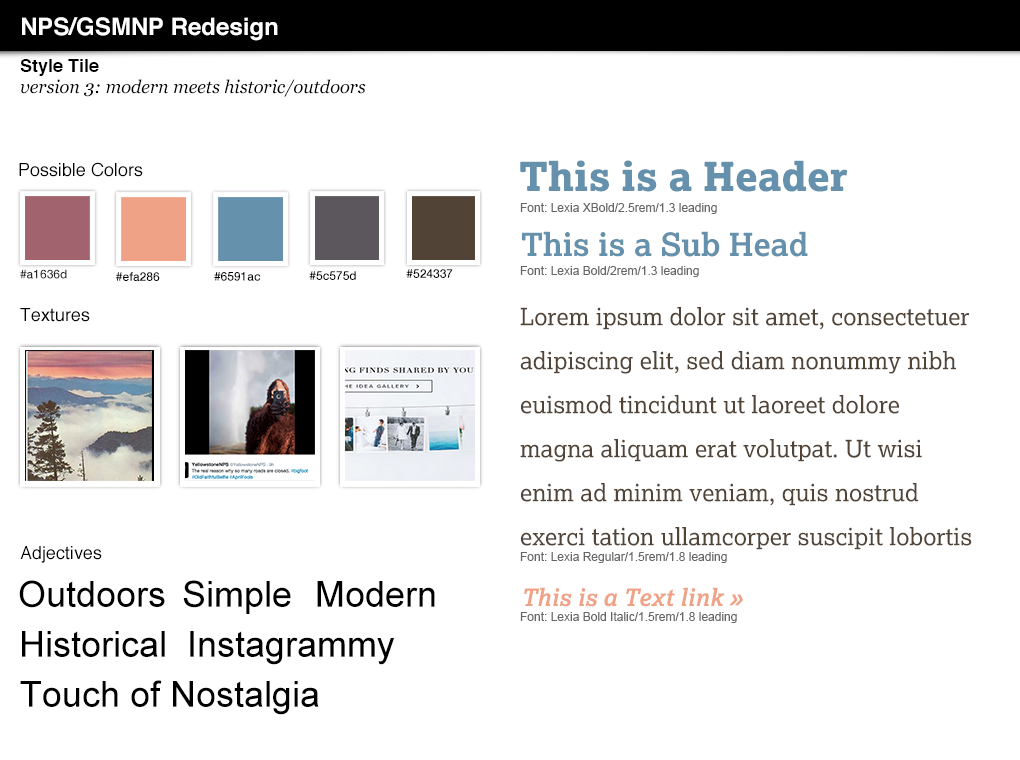
<style>
.page{position:relative;width:1020px;height:760px;background:#ffffff}
.page>*{position:absolute;margin:0}
.t1{font:24px "Helvetica-Bold";color:#ffffff}
.t2{font:18px "Helvetica-Bold";color:#000000}
.t3{font:18px "Georgia-Italic";color:#000000}
.t4{font:40px "Lexia-XBold";color:#6591ac}
.t5{font:18px "Helvetica";color:#000000}
.t6{font:12px "ArialMT";color:#666666}
.t7{font:32px "Lexia-Bold";color:#6591ac}
.t8{font:12px "HelveticaNeue-Medium";color:#282828}
.t9{font:12px "HelveticaNeue-Medium";color:#000000}
.t10{font:24px/44px "Lexia-Regular";color:#524337}
.t11{font:36px "ArialMT";color:#000000}
.t12{font:24px "Lexia-BoldItalic";color:#efa286}
</style>
<div class="page">
<p class="t1" style="left:22px;top:17px;width:256px;height:24px">NPS/GSMNP Redesign</p>
<p class="t2" style="left:20px;top:59px;width:79px;height:17px">Style Tile</p>
<p class="t3" style="left:20px;top:79px;width:346px;height:18px">version 3: modern meets historic/outdoors</p>
<p class="t4" style="left:520px;top:160px;width:328px;height:32px">This is a Header</p>
<p class="t5" style="left:19px;top:162px;width:124px;height:15px">Possible Colors</p>
<p class="t6" style="left:520px;top:203px;width:197px;height:11px">Font: Lexia XBold/2.5rem/1.3 leading</p>
<p class="t7" style="left:522px;top:231px;width:286px;height:26px">This is a Sub Head</p>
<p class="t8" style="left:20px;top:269px;width:47px;height:10px">#a1636d</p>
<p class="t9" style="left:406px;top:269px;width:47px;height:9px">#524337</p>
<p class="t6" style="left:520px;top:266px;width:179px;height:11px">Font: Lexia Bold/2rem/1.3 leading</p>
<p class="t9" style="left:116px;top:272px;width:44px;height:9px">#efa286</p>
<p class="t9" style="left:214px;top:272px;width:47px;height:9px">#6591ac</p>
<p class="t9" style="left:309px;top:271px;width:47px;height:9px">#5c575d</p>
<p class="t5" style="left:20px;top:308px;width:70px;height:14px">Textures</p>
<p class="t10" style="left:520px;top:307px;width:452px;height:243px">Lorem ipsum dolor sit amet, consectetuer adipiscing elit, sed diam nonummy nibh euismod tincidunt ut laoreet dolore magna aliquam erat volutpat. Ut wisi enim ad minim veniam, quis nostrud exerci tation ullamcorper suscipit lobortis nisl ut aliquip ex ea commodo consequat. Duis autem vel feugait.</p>
<p class="t5" style="left:20px;top:546px;width:82px;height:17px">Adjectives</p>
<p class="t6" style="left:520px;top:552px;width:207px;height:11px">Font: Lexia Regular/1.5rem/1.8 leading</p>
<p class="t11" style="left:19px;top:580px;width:146px;height:28px">Outdoors</p>
<p class="t11" style="left:183px;top:580px;width:108px;height:34px">Simple</p>
<p class="t11" style="left:317px;top:581px;width:118px;height:26px">Modern</p>
<p class="t12" style="left:524px;top:587px;width:220px;height:20px">This is a Text link »</p>
<p class="t6" style="left:520px;top:612px;width:217px;height:11px">Font: Lexia Bold Italic/1.5rem/1.8 leading</p>
<p class="t11" style="left:22px;top:631px;width:143px;height:26px">Historical</p>
<p class="t11" style="left:190px;top:631px;width:205px;height:34px">Instagrammy</p>
<p class="t11" style="left:20px;top:680px;width:299px;height:35px">Touch of Nostalgia</p>
</div>
